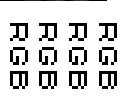
<style>
.page{position:relative;width:128px;height:107px;background:#ffffff}
.page>*{position:absolute;margin:0}
.t1{font:24px "Speccy";color:#000000}
</style>
<div class="page">
<p class="t1" style="left:10px;top:23px;width:18px;height:66px;rotate:90deg">RGB</p>
<p class="t1" style="left:39px;top:23px;width:18px;height:66px;rotate:90deg">RGB</p>
<p class="t1" style="left:69px;top:23px;width:18px;height:66px;rotate:90deg">RGB</p>
<p class="t1" style="left:99px;top:23px;width:18px;height:66px;rotate:90deg">RGB</p>
</div>
